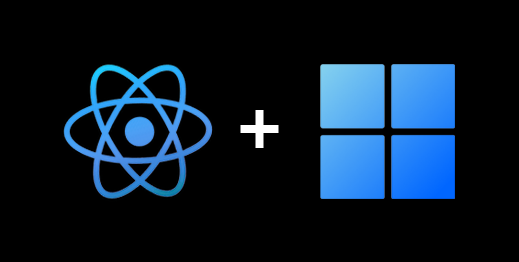
<style>
.page{position:relative;width:519px;height:262px;background:#000000}
.page>*{position:absolute;margin:0}
.t1{font:80px "Gisha-Bold";color:#ffffff}
</style>
<div class="page">
<p class="t1" style="left:240px;top:110px;width:39px;height:38px">+</p>
</div>
